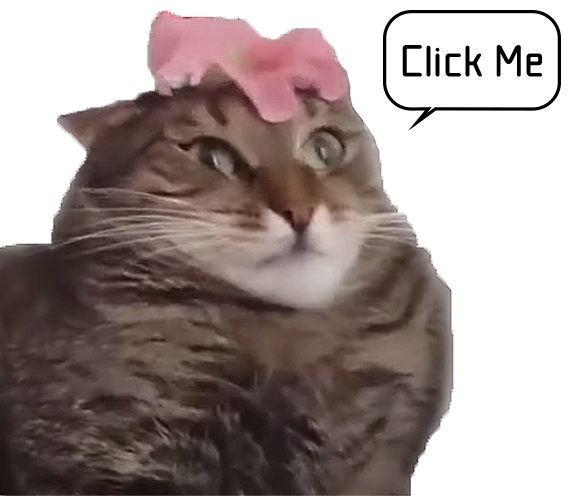
<style>
.page{position:relative;width:573px;height:496px;background:#ffffff}
.page>*{position:absolute;margin:0}
.t1{font:46.6px "Mamelon";letter-spacing:0.01em;color:#000000}
</style>
<div class="page">
<p class="t1" style="left:402px;top:45px;width:141px;height:32px">Click Me</p>
</div>
